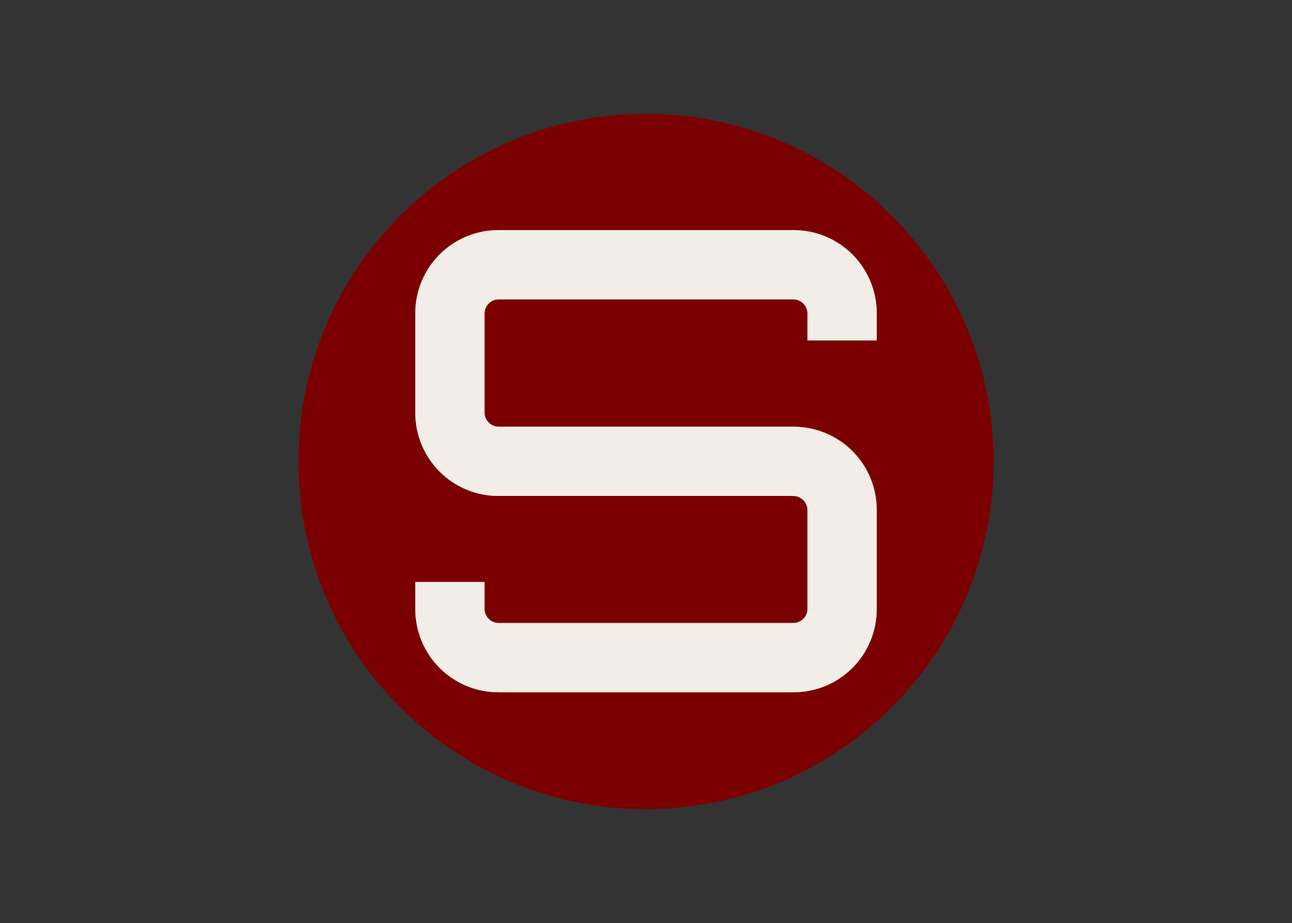
<style>
.page{position:relative;width:1292px;height:923px;background:#333333}
.page>*{position:absolute;margin:0}
.t1{font:640.9px "Orbitron-Medium";color:#f2ede6}
</style>
<div class="page">
<p class="t1" style="left:415px;top:229px;width:462px;height:464px">S</p>
</div>
